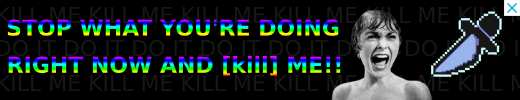
<style>
.page{position:relative;width:520px;height:100px;background:#000000}
.page>*{position:absolute;margin:0}
.t1{font:22px "MontserratRoman-ExtraBold"}
</style>
<div class="page">
<p class="t1" style="left:7px;top:19px;width:332px;height:18px">STOP WHAT YOU'RE DOING</p>
<p class="t1" style="left:8px;top:56px;width:333px;height:20px">RIGHT NOW AND [kill] ME!!</p>
</div>
